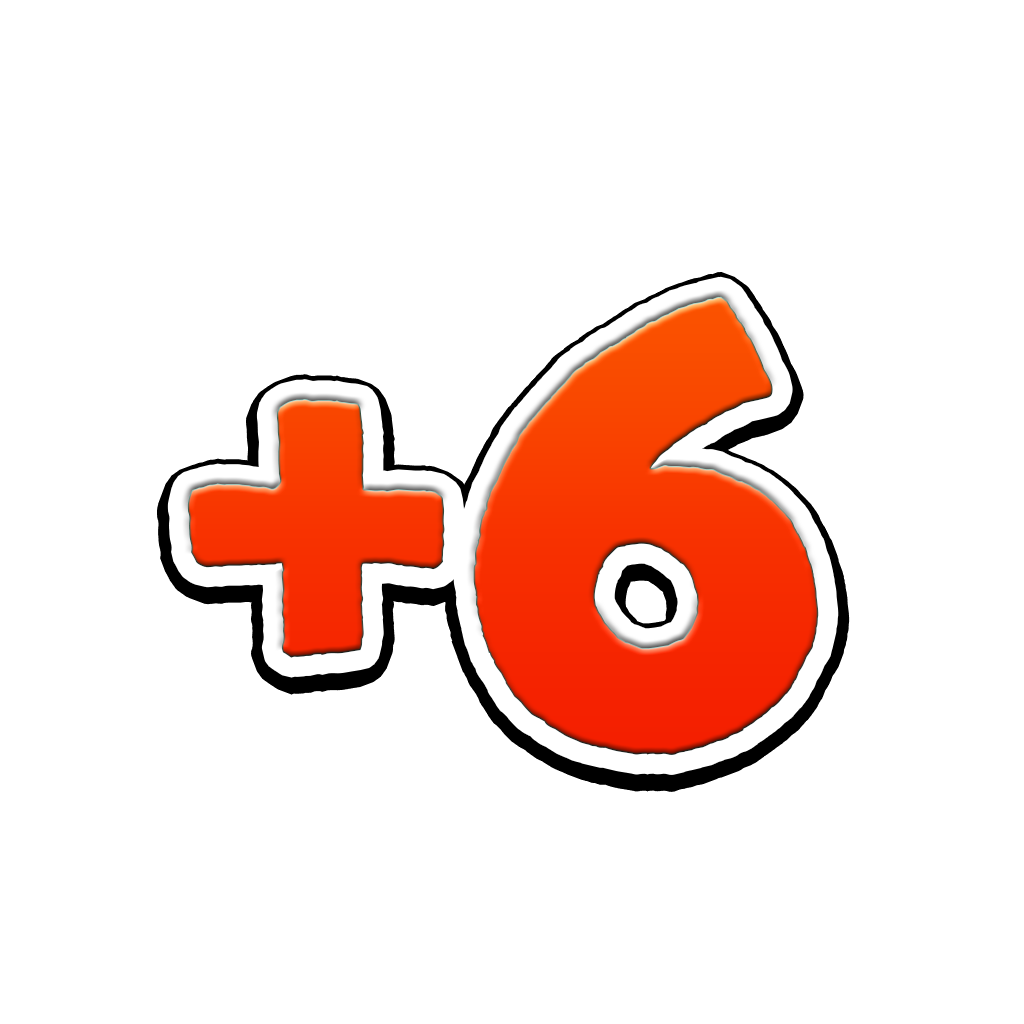
<style>
.page{position:relative;width:1024px;height:1024px;background:#ffffff}
.page>*{position:absolute;margin:0}
.t1{font:600px "Skranji-Bold";color:#f83300}
</style>
<div class="page">
<p class="t1" style="left:187px;top:296px;width:632px;height:459px">+6</p>
</div>
